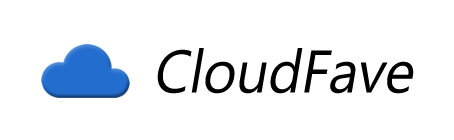
<style>
.page{position:relative;width:454px;height:140px;background:#ffffff}
.page>*{position:absolute;margin:0}
.t1{font:60px "MicrosoftTaiLe";letter-spacing:-0.01em;color:#000000;font-style:italic;scale:0.96 1}
</style>
<div class="page">
<p class="t1" style="left:157px;top:48px;width:257px;height:46px">CloudFave</p>
</div>
